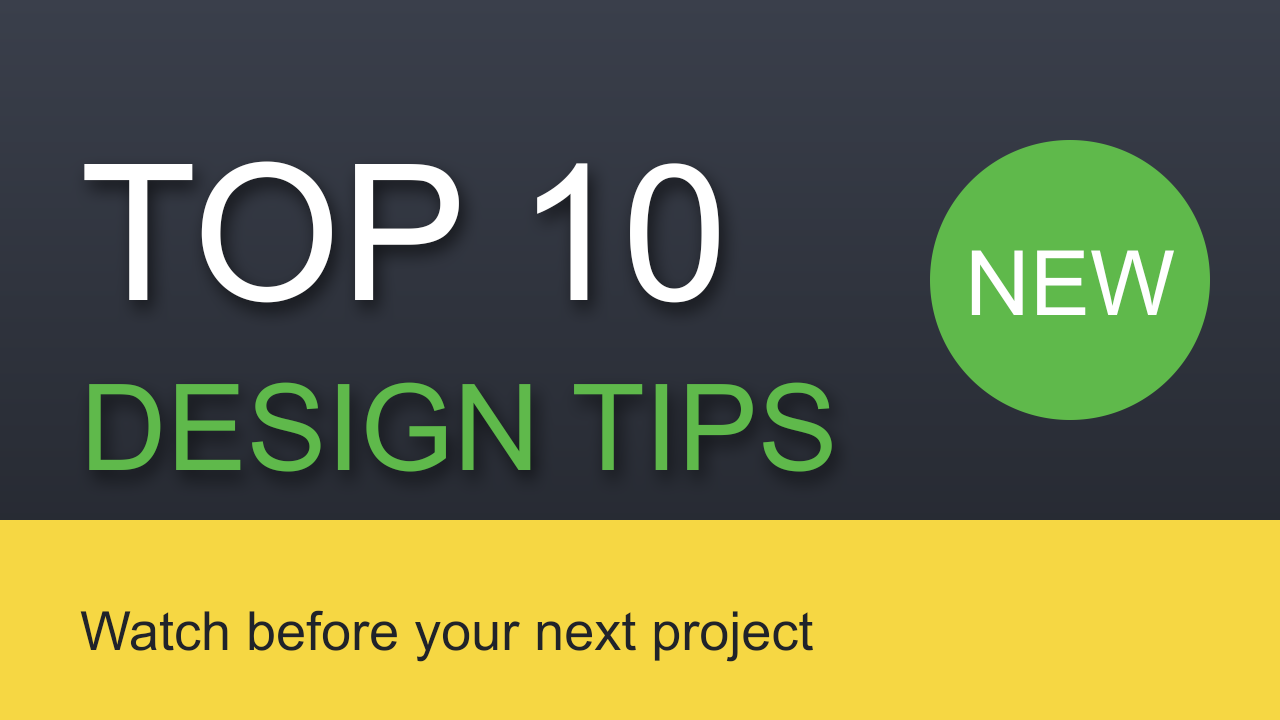
<style>
.page{position:relative;width:1280px;height:720px;background:#f6d743}
.page>*{position:absolute;margin:0}
.t1{font:190px "ArialMT";color:#ffffff}
.t2{font:90px "ArialMT";color:#ffffff}
.t3{font:120px "ArialMT";color:#5fb94b}
.t4{font:54px "ArialMT";color:#20232a}
</style>
<div class="page">
<p class="t1" style="left:83px;top:161px;width:637px;height:143px">TOP 10</p>
<p class="t2" style="left:970px;top:250px;width:205px;height:65px">NEW</p>
<p class="t3" style="left:88px;top:382px;width:745px;height:91px">DESIGN TIPS</p>
<p class="t4" style="left:79px;top:610px;width:735px;height:53px">Watch before your next project</p>
</div>
